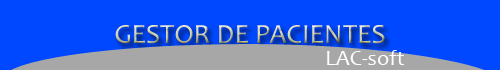
<style>
.page{position:relative;width:500px;height:70px;background:#0048ff}
.page>*{position:absolute;margin:0}
.t1{font:27.8px "Candara"}
.t2{font:22.2px "Candara";color:#ffffff}
</style>
<div class="page">
<p class="t1" style="left:115px;top:25px;width:270px;height:19px">GESTOR DE PACIENTES</p>
<p class="t2" style="left:327px;top:50px;width:77px;height:15px">LAC-soft</p>
</div>
